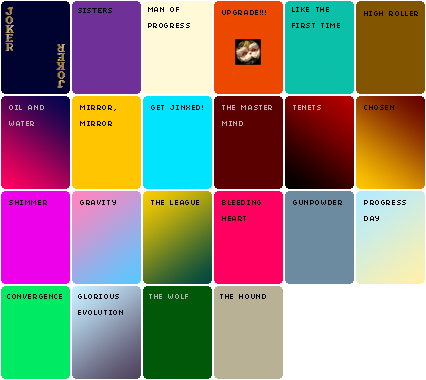
<style>
.page{position:relative;width:426px;height:380px}
.page>*{position:absolute;margin:0}
.t1{font:8px/16px "04b03";letter-spacing:0.07em;color:#b4b4b4}
.t2{font:8px/16px "04b03";letter-spacing:0.07em;color:#000000}
.t3{font:8px "04b03";letter-spacing:0.07em;color:#000000}
.t4{font:8px "04b03";letter-spacing:0.07em;color:#b4b4b4}
</style>
<div class="page">
<p class="t1" style="left:9px;top:105px;width:35px;height:21px">OIL AND<br>WATER</p>
<p class="t2" style="left:80px;top:105px;width:36px;height:21px">MIRROR,<br>MIRROR</p>
<p class="t3" style="left:151px;top:105px;width:52px;height:5px">GET JINXED!</p>
<p class="t1" style="left:222px;top:105px;width:50px;height:21px">THE MASTER<br>MIND</p>
<p class="t4" style="left:293px;top:105px;width:28px;height:5px">TENETS</p>
<p class="t3" style="left:364px;top:105px;width:30px;height:5px">CHOSEN</p>
<p class="t3" style="left:9px;top:200px;width:38px;height:5px">SHIMMER</p>
<p class="t3" style="left:80px;top:200px;width:36px;height:5px">GRAVITY</p>
<p class="t3" style="left:151px;top:200px;width:48px;height:5px">THE LEAGUE</p>
<p class="t2" style="left:222px;top:200px;width:39px;height:21px">BLEEDING<br>HEART</p>
<p class="t3" style="left:293px;top:200px;width:49px;height:5px">GUNPOWDER</p>
<p class="t2" style="left:364px;top:200px;width:42px;height:21px">PROGRESS<br>DAY</p>
<p class="t3" style="left:7px;top:294px;width:55px;height:5px">CONVERGENCE</p>
<p class="t2" style="left:78px;top:294px;width:45px;height:21px">GLORIOUS<br>EVOLUTION</p>
<p class="t4" style="left:149px;top:294px;width:39px;height:5px">THE WOLF</p>
<p class="t3" style="left:220px;top:294px;width:46px;height:5px">THE HOUND</p>
</div>
